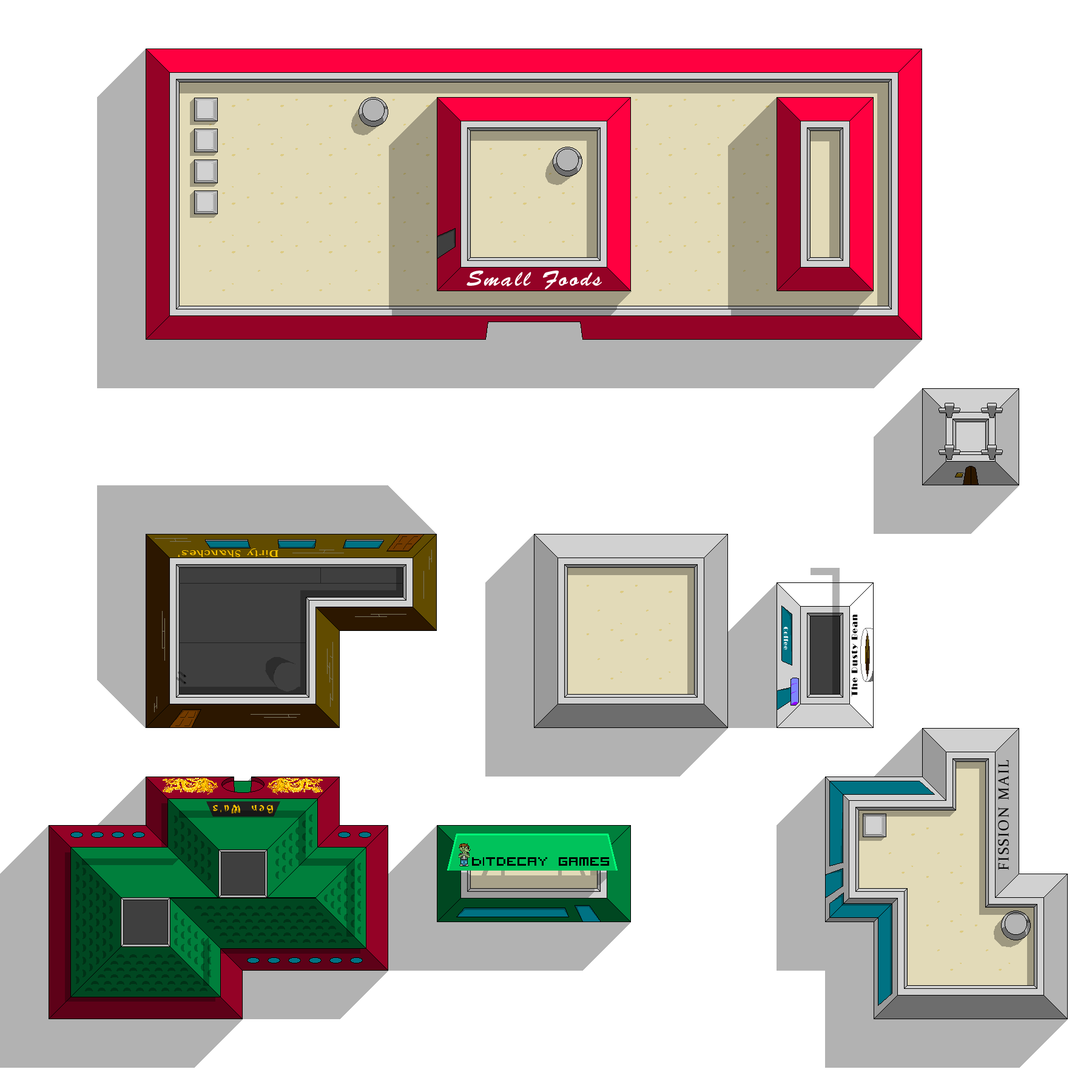
<style>
.page{position:relative;width:1092px;height:1092px;background:#ffffff}
.page>*{position:absolute;margin:0}
.t1{font:10.9px "Denslow";letter-spacing:0.1em;color:#ffc600}
.t2{font:8.5px "Broadway";letter-spacing:0.1em;color:#000000}
.t3{font:6.1px "Broadway";letter-spacing:0.1em;color:#ffffff}
.t4{font:14.6px "Constantia";letter-spacing:0.1em;color:#000000}
.t5{font:14.6px "Bonzai-Regular";letter-spacing:0.1em;color:#ffc600}
</style>
<div class="page">
<p class="t1" style="left:178px;top:548px;width:100px;height:9px;rotate:180deg">Dirty Shanches’</p>
<p class="t2" style="left:851px;top:615px;width:7px;height:81px;rotate:-90deg">The Dusty Bean</p>
<p class="t3" style="left:783px;top:627px;width:6px;height:23px;rotate:90deg">Coffee</p>
<p class="t4" style="left:998px;top:760px;width:11px;height:110px;rotate:-90deg">FISSION MAIL</p>
<p class="t5" style="left:213px;top:804px;width:60px;height:10px;rotate:180deg">Ben Wa~s</p>
</div>
